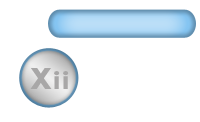
<style>
.page{position:relative;width:200px;height:122px;background:#ffffff}
.page>*{position:absolute;margin:0}
.t1{font:24px "ContinuumBold";letter-spacing:0.075em;color:#a8a7a7;scale:1.25 1}
.t2{font:30px "ContinuumBold";letter-spacing:0.075em;color:#a8a7a7;scale:1.1 1}
</style>
<div class="page">
<p class="t1" style="left:30px;top:68px;width:39px;height:21px"><span class="t2">X</span>ii</p>
</div>
